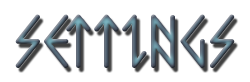
<style>
.page{position:relative;width:250px;height:82px;background:#ffffff}
.page>*{position:absolute;margin:0}
.t1{font:66.7px "ComicRunes"}
</style>
<div class="page">
<p class="t1" style="left:15px;top:14px;width:220px;height:54px">SETTINGS</p>
</div>
